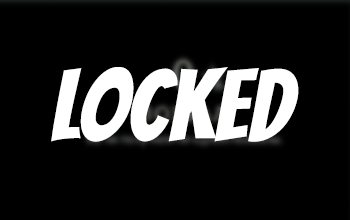
<style>
.page{position:relative;width:350px;height:220px;background:#000000}
.page>*{position:absolute;margin:0}
.t1{font:99.4px "Bangers-Regular";color:#ffffff}
</style>
<div class="page">
<p class="t1" style="left:51px;top:67px;width:248px;height:75px">LOCKED</p>
</div>
